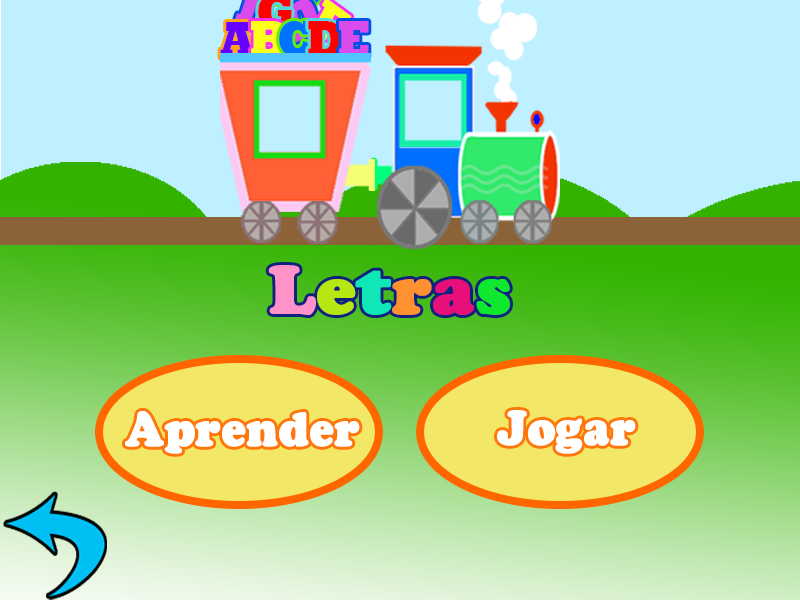
<style>
.page{position:relative;width:800px;height:600px;background:#bff0ff}
.page>*{position:absolute;margin:0}
.t1{font:12.8px/60.6px "Rockwell-ExtraBold";letter-spacing:-0.05em;color:#6600ff;scale:0.84 1}
.t2{font:12.8px/60.6px "Rockwell-ExtraBold";letter-spacing:-0.05em;color:#fcff1a;scale:0.84 1}
.t3{font:12.8px/60.6px "Rockwell-ExtraBold";letter-spacing:-0.05em;color:#0072ff;scale:0.84 1}
.t4{font:12.8px/60.6px "Rockwell-ExtraBold";letter-spacing:-0.05em;color:#ff0000;scale:0.84 1}
.t5{font:12.8px/60.6px "Rockwell-ExtraBold";letter-spacing:-0.05em;color:#da4beb;scale:0.84 1}
.t6{font:66.4px "CooperBlackStd";color:#ff92c8;font-weight:bold;scale:1.04 1}
.t7{font:66.4px "CooperBlackStd";color:#b7e710;font-weight:bold;scale:1.04 1}
.t8{font:66.4px "CooperBlackStd";color:#10e7b7;font-weight:bold;scale:1.04 1}
.t9{font:66.4px "CooperBlackStd";color:#ff9130;font-weight:bold;scale:1.04 1}
.t10{font:66.4px "CooperBlackStd";color:#e7107a;font-weight:bold;scale:1.04 1}
.t11{font:66.4px "CooperBlackStd";color:#10e72f;font-weight:bold;scale:1.04 1}
.t12{font:46.4px "CooperBlackStd";color:#ffffff;font-weight:bold;scale:0.94 1}
</style>
<div class="page">
<p class="t1" style="left:220px;top:22px;width:34px;height:36px">A</p>
<p class="t2" style="left:251px;top:21px;width:35px;height:36px">B</p>
<p class="t3" style="left:279px;top:21px;width:33px;height:36px">C</p>
<p class="t4" style="left:308px;top:21px;width:36px;height:36px">D</p>
<p class="t5" style="left:339px;top:21px;width:30px;height:36px">E</p>
<p class="t6" style="left:268px;top:265px;width:242px;height:50px">L<span class="t7">e</span><span class="t8">t</span><span class="t9">r</span><span class="t10">a</span><span class="t11">s</span></p>
<p class="t12" style="left:125px;top:411px;width:235px;height:43px">Aprender</p>
<p class="t12" style="left:497px;top:410px;width:139px;height:44px">Jogar</p>
</div>
